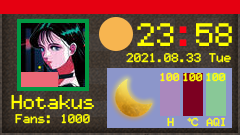
<style>
.page{position:relative;width:240px;height:135px}
.page>*{position:absolute;margin:0}
.t1{font:26px "k12x8";color:#ffff00}
.t2{font:26px "k12x8";color:#ff0012}
.t3{font:10px "k12x8";color:#ffff00}
.t4{font:9px "k12x8";color:#ffff00}
.t5{font:16px "k12x8";color:#ffff00}
</style>
<div class="page">
<p class="t1" style="left:137px;top:23px;width:95px;height:23px">23<span class="t2">:</span>58</p>
<p class="t3" style="left:126px;top:53px;width:105px;height:10px">2021.08.33 Tue</p>
<p class="t4" style="left:160px;top:72px;width:20px;height:10px">100</p>
<p class="t4" style="left:183px;top:72px;width:20px;height:10px">100</p>
<p class="t4" style="left:206px;top:72px;width:20px;height:10px">100</p>
<p class="t5" style="left:11px;top:94px;width:83px;height:16px">Hotakus</p>
<p class="t3" style="left:15px;top:114px;width:75px;height:10px">Fans: 1000</p>
<p class="t4" style="left:167px;top:117px;width:7px;height:10px">H</p>
<p class="t4" style="left:187px;top:117px;width:12px;height:10px">℃</p>
<p class="t4" style="left:206px;top:117px;width:19px;height:10px">AQI</p>
</div>
